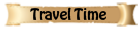
<style>
.page{position:relative;width:140px;height:30px;background:#ffffff}
.page>*{position:absolute;margin:0}
.t1{font:14px "HoboStd";color:#000000}
</style>
<div class="page">
<p class="t1" style="left:30px;top:7px;width:76px;height:13px">Travel Time</p>
</div>
